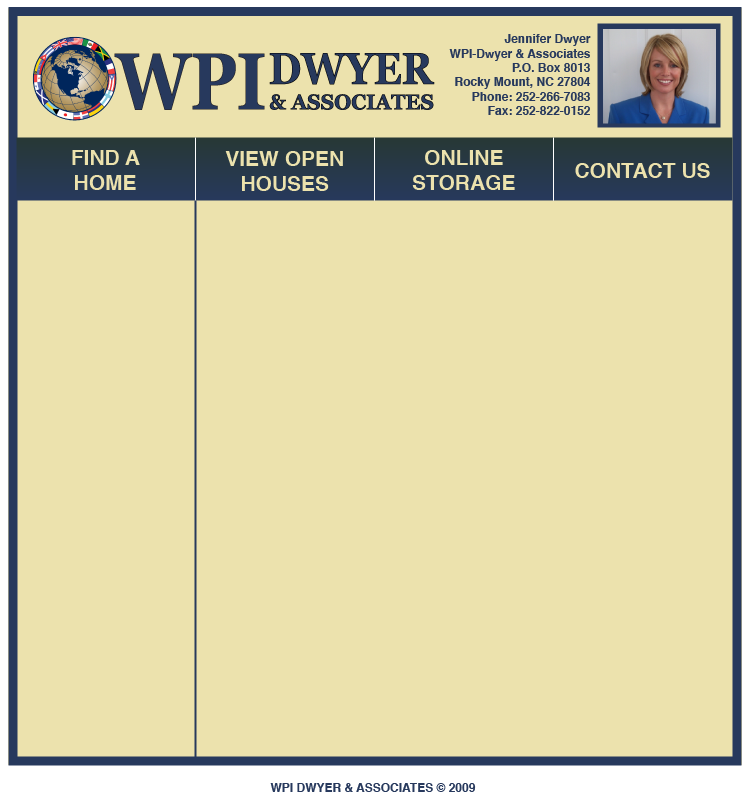
<style>
.page{position:relative;width:750px;height:800px;background:#ece2ad}
.page>*{position:absolute;margin:0}
.t1{font:12px "Helvetica-Bold";color:#27395d}
.t2{font:21px "Helvetica-Bold";color:#ece2ad}
</style>
<div class="page">
<p class="t1" style="left:449px;top:34px;width:142px;height:81px;text-align:right">Jennifer Dwyer<br>WPI-Dwyer &amp; Associates<br>P.O. Box 8013<br>Rocky Mount, NC 27804<br>Phone: 252-266-7083<br>Fax: 252-822-0152</p>
<p class="t2" style="left:72px;top:150px;width:68px;height:40px;text-align:center">FIND A <br>HOME</p>
<p class="t2" style="left:412px;top:150px;width:103px;height:40px;text-align:center">ONLINE <br>STORAGE</p>
<p class="t2" style="left:225px;top:151px;width:118px;height:40px;text-align:center">VIEW OPEN HOUSES</p>
<p class="t2" style="left:575px;top:163px;width:135px;height:15px">CONTACT US</p>
<p class="t1" style="left:270px;top:783px;width:206px;height:9px">WPI DWYER &amp; ASSOCIATES © 2009</p>
</div>
